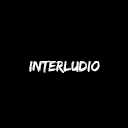
<style>
.page{position:relative;width:128px;height:128px;background:#000000}
.page>*{position:absolute;margin:0}
.t1{font:15.2px "EdoSZ";color:#ffffff}
</style>
<div class="page">
<p class="t1" style="left:29px;top:60px;width:71px;height:13px">interludio</p>
</div>
